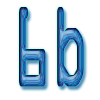
<style>
.page{position:relative;width:100px;height:100px;background:#ffffff}
.page>*{position:absolute;margin:0}
.t1{font:119.6px "OCRAExtended";font-weight:bold;scale:0.5 1}
</style>
<div class="page">
<p class="t1" style="left:19px;top:7px;width:65px;height:80px">6b</p>
</div>
